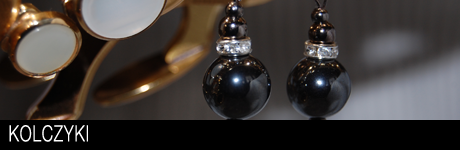
<style>
.page{position:relative;width:460px;height:150px}
.page>*{position:absolute;margin:0}
.t1{font:22.4px "HelveticaNeueCE-Light";letter-spacing:0.05em;color:#ffffff;scale:0.71 1}
</style>
<div class="page">
<p class="t1" style="left:9px;top:125px;width:79px;height:17px">KOLCZYKI</p>
</div>
